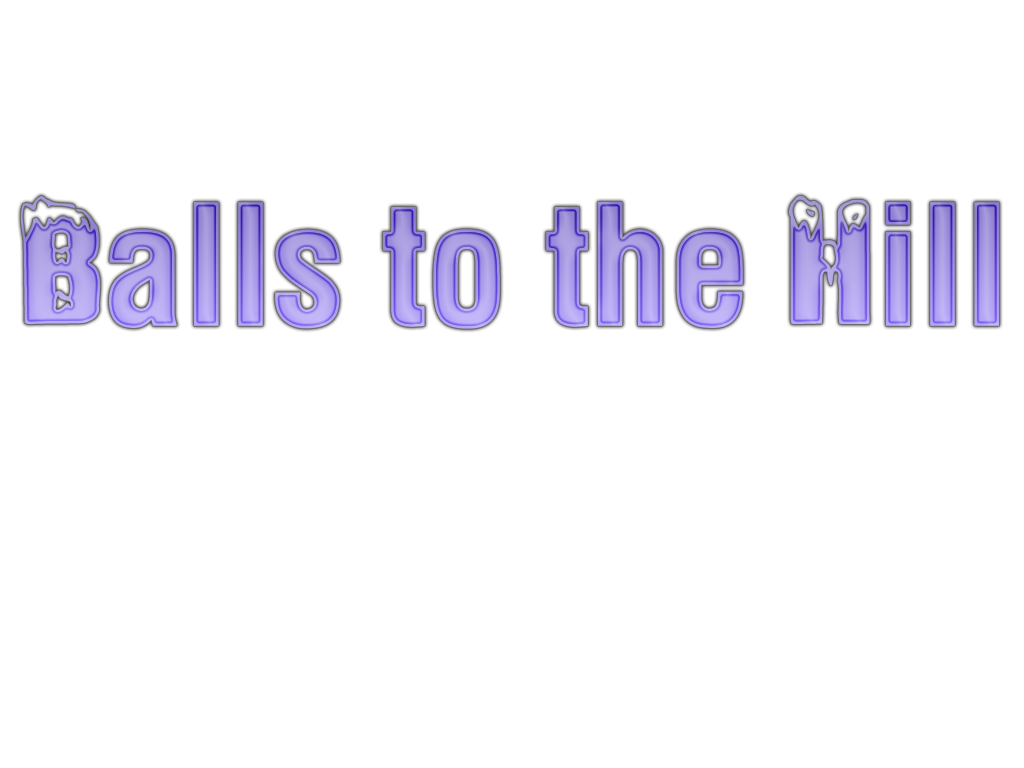
<style>
.page{position:relative;width:1024px;height:768px;background:#ffffff}
.page>*{position:absolute;margin:0}
.t1{font:160px "Ice-Snow"}
</style>
<div class="page">
<p class="t1" style="left:20px;top:196px;width:979px;height:133px">Balls to the Hill</p>
</div>
